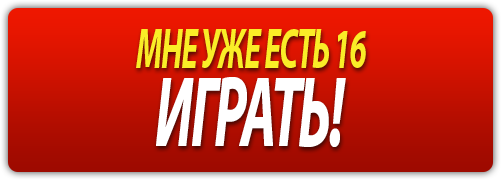
<style>
.page{position:relative;width:501px;height:180px}
.page>*{position:absolute;margin:0}
.t1{font:56.5px "MyriadPro-BoldIt";letter-spacing:-0.04em;color:#faed27;text-transform:uppercase;scale:0.57 1}
.t2{font:101.5px "MyriadPro-BoldIt";letter-spacing:-0.04em;color:#ffffff;text-transform:uppercase;scale:0.57 1}
</style>
<div class="page">
<p class="t1" style="left:136px;top:29px;width:230px;height:39px">Мне уже есть 16</p>
<p class="t2" style="left:156px;top:77px;width:190px;height:70px">Играть!</p>
</div>
